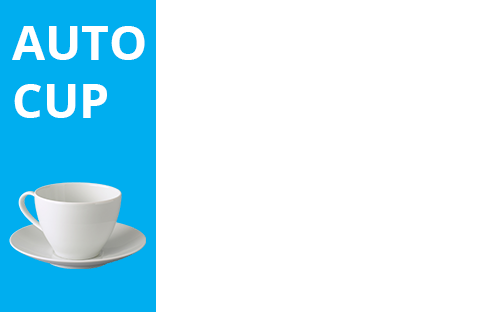
<style>
.page{position:relative;width:493px;height:312px;background:#ffffff}
.page>*{position:absolute;margin:0}
.t1{font:48px "OpenSans-Bold";color:#ffffff}
</style>
<div class="page">
<p class="t1" style="left:12px;top:26px;width:133px;height:92px">AUTO<br>CUP</p>
</div>
